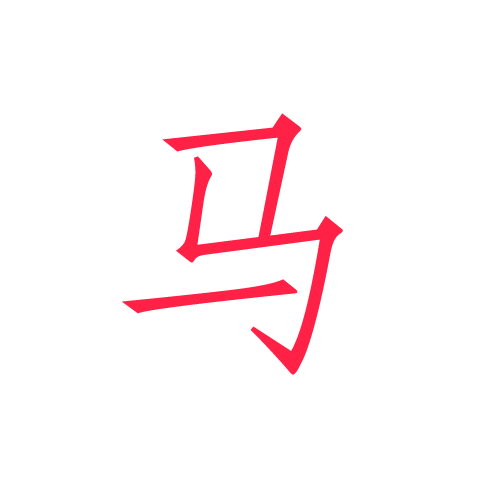
<style>
.page{position:relative;width:480px;height:480px;background:#ffffff}
.page>*{position:absolute;margin:0}
.t1{font:288px "STFangsong";color:#ff2146}
</style>
<div class="page">
<p class="t1" style="left:122px;top:113px;width:221px;height:262px">马</p>
</div>
